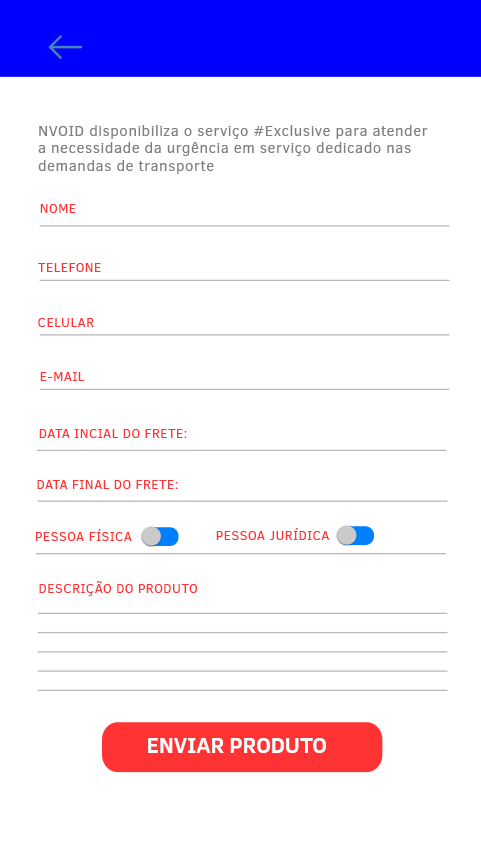
<style>
.page{position:relative;width:481px;height:855px;background:#ffffff}
.page>*{position:absolute;margin:0}
.t1{font:15.4px/17.5px "ClearSans";letter-spacing:0.02em;color:#7f7f7f}
.t2{font:13.4px "ClearSans";letter-spacing:0.02em;color:#ff3333}
.t3{font:21.8px "ClearSans-Bold";color:#ffffff}
</style>
<div class="page">
<p class="t1" style="left:38px;top:125px;width:390px;height:49px">NVOID disponibiliza o serviço #Exclusive para atender<br>a necessidade da urgência em serviço dedicado nas<br>demandas de transporte</p>
<p class="t2" style="left:40px;top:204px;width:36px;height:9px">NOME</p>
<p class="t2" style="left:38px;top:263px;width:63px;height:9px">TELEFONE</p>
<p class="t2" style="left:38px;top:318px;width:56px;height:9px">CELULAR</p>
<p class="t2" style="left:40px;top:372px;width:45px;height:9px">E-MAIL</p>
<p class="t2" style="left:39px;top:429px;width:148px;height:9px">DATA INCIAL DO FRETE:</p>
<p class="t2" style="left:37px;top:480px;width:141px;height:9px">DATA FINAL DO FRETE:</p>
<p class="t2" style="left:36px;top:529px;width:96px;height:12px">PESSOA FÍSICA</p>
<p class="t2" style="left:216px;top:528px;width:114px;height:12px">PESSOA JURÍDICA</p>
<p class="t2" style="left:39px;top:581px;width:158px;height:15px">DESCRIÇÃO DO PRODUTO</p>
<p class="t3" style="left:148px;top:738px;width:178px;height:15px">ENVIAR PRODUTO</p>
</div>
